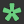
<style>
.page{position:relative;width:24px;height:24px;background:#333333}
.page>*{position:absolute;margin:0}
.t1{font:46px "LucidaSansUnicode";letter-spacing:0.02em;color:#6bce80;font-weight:bold}
</style>
<div class="page">
<p class="t1" style="left:2px;top:3px;width:20px;height:18px">*</p>
</div>
